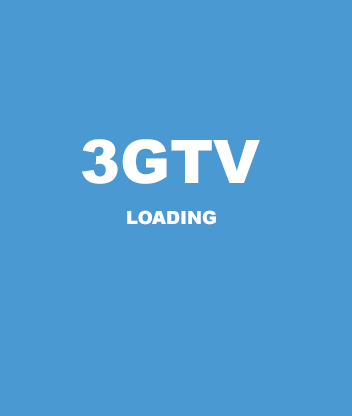
<style>
.page{position:relative;width:352px;height:416px;background:#4b99d2}
.page>*{position:absolute;margin:0}
.t1{font:60px "Arial-Black";color:#ffffff}
.t2{font:18px "Arial-Black";color:#ffffff}
</style>
<div class="page">
<p class="t1" style="left:82px;top:139px;width:178px;height:45px">3GTV</p>
<p class="t2" style="left:127px;top:210px;width:89px;height:15px">LOADING</p>
</div>
